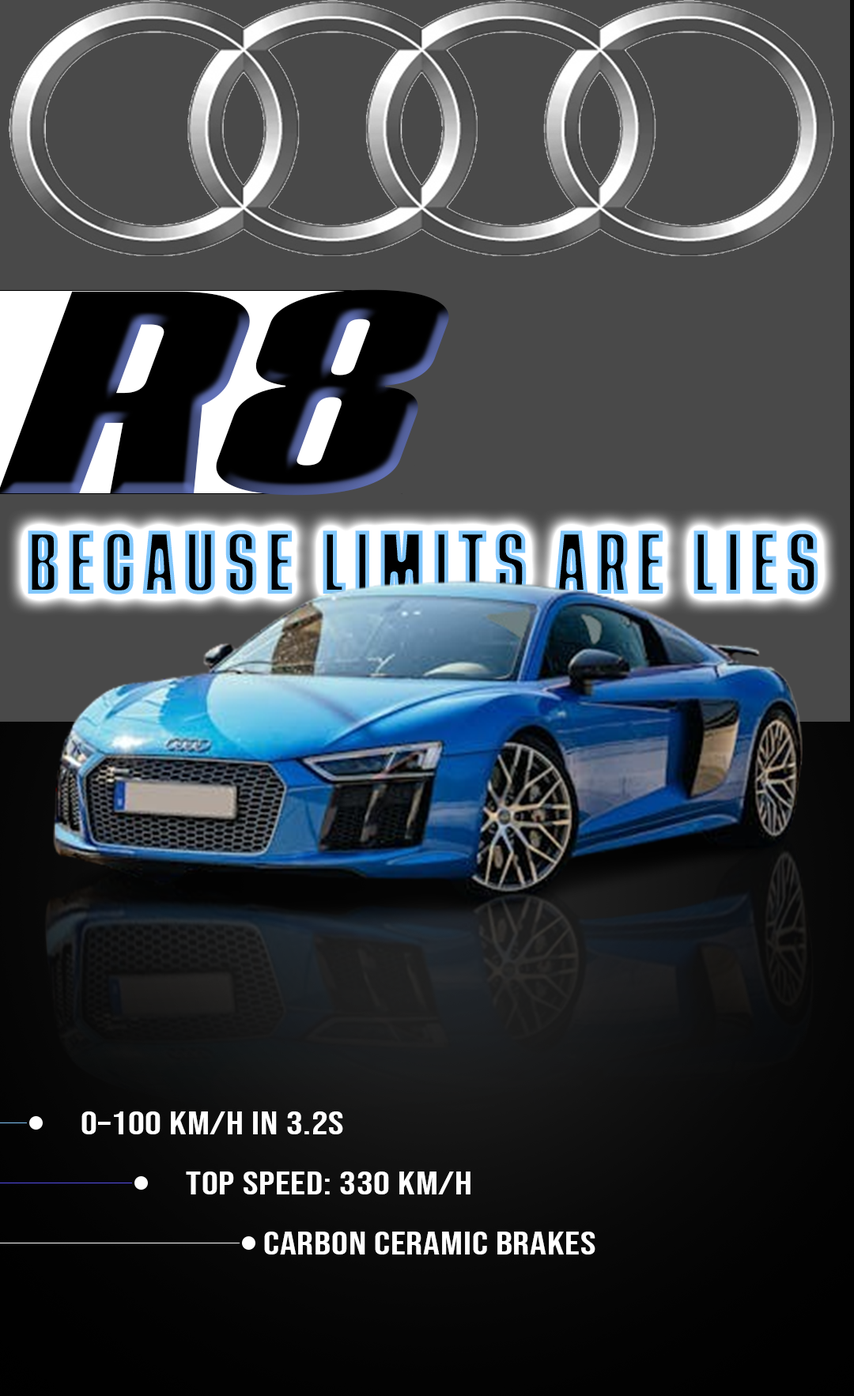
<style>
.page{position:relative;width:854px;height:1396px;background:#494949}
.page>*{position:absolute;margin:0}
.t1{font:65.9px "TuskerGrotesk-4700Bold";letter-spacing:0.12em;font-weight:bold}
.t2{font:32.4px "BebasNeue-Regular";letter-spacing:0.02em;color:#ffffff;scale:1.26 1}
</style>
<div class="page">
<p class="t1" style="left:28px;top:530px;width:790px;height:65px">BECAUSE LIMITS ARE LIES</p>
<p class="t2" style="left:81px;top:1112px;width:262px;height:23px">0–100 km/h in 3.2s</p>
<p class="t2" style="left:186px;top:1172px;width:284px;height:23px">Top Speed: 330 km/h</p>
<p class="t2" style="left:264px;top:1232px;width:331px;height:23px">Carbon Ceramic Brakes</p>
</div>
